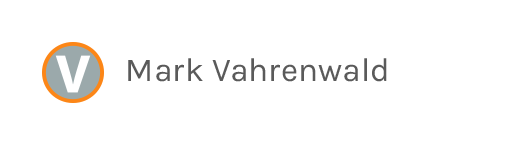
<style>
.page{position:relative;width:511px;height:144px;background:#ffffff}
.page>*{position:absolute;margin:0}
.t1{font:33.3px "Karla-Regular";color:#5a5a5a}
</style>
<div class="page">
<p class="t1" style="left:128px;top:58px;width:259px;height:24px">Mark Vahrenwald</p>
</div>
